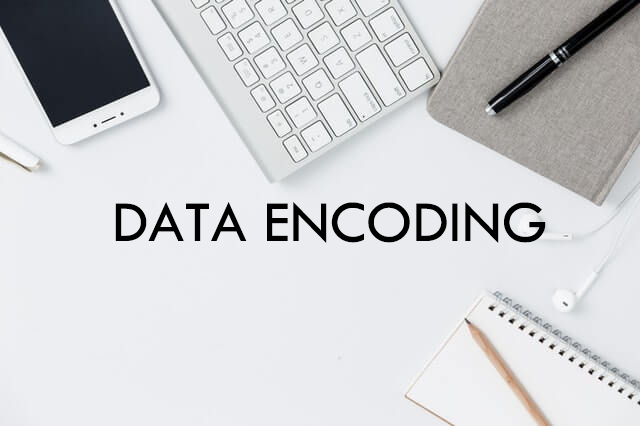
<style>
.page{position:relative;width:640px;height:426px}
.page>*{position:absolute;margin:0}
.t1{font:60px "TwCenMT-Regular";color:#000000}
</style>
<div class="page">
<p class="t1" style="left:115px;top:202px;width:431px;height:41px">DATA ENCODING</p>
</div>
